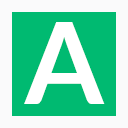
<style>
.page{position:relative;width:128px;height:128px;background:#00ba71}
.page>*{position:absolute;margin:0}
.t1{font:113.1px "Lato-Bold";letter-spacing:0.12em;color:#ffffff}
</style>
<div class="page">
<p class="t1" style="left:24px;top:22px;width:81px;height:82px">A</p>
</div>
